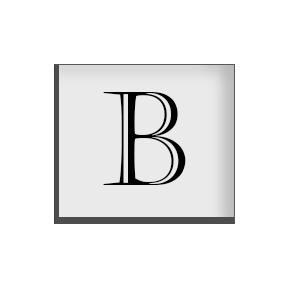
<style>
.page{position:relative;width:288px;height:288px;background:#ffffff}
.page>*{position:absolute;margin:0}
.t1{font:130px "Castellar";color:#000000}
</style>
<div class="page">
<p class="t1" style="left:103px;top:92px;width:83px;height:93px">B</p>
</div>
